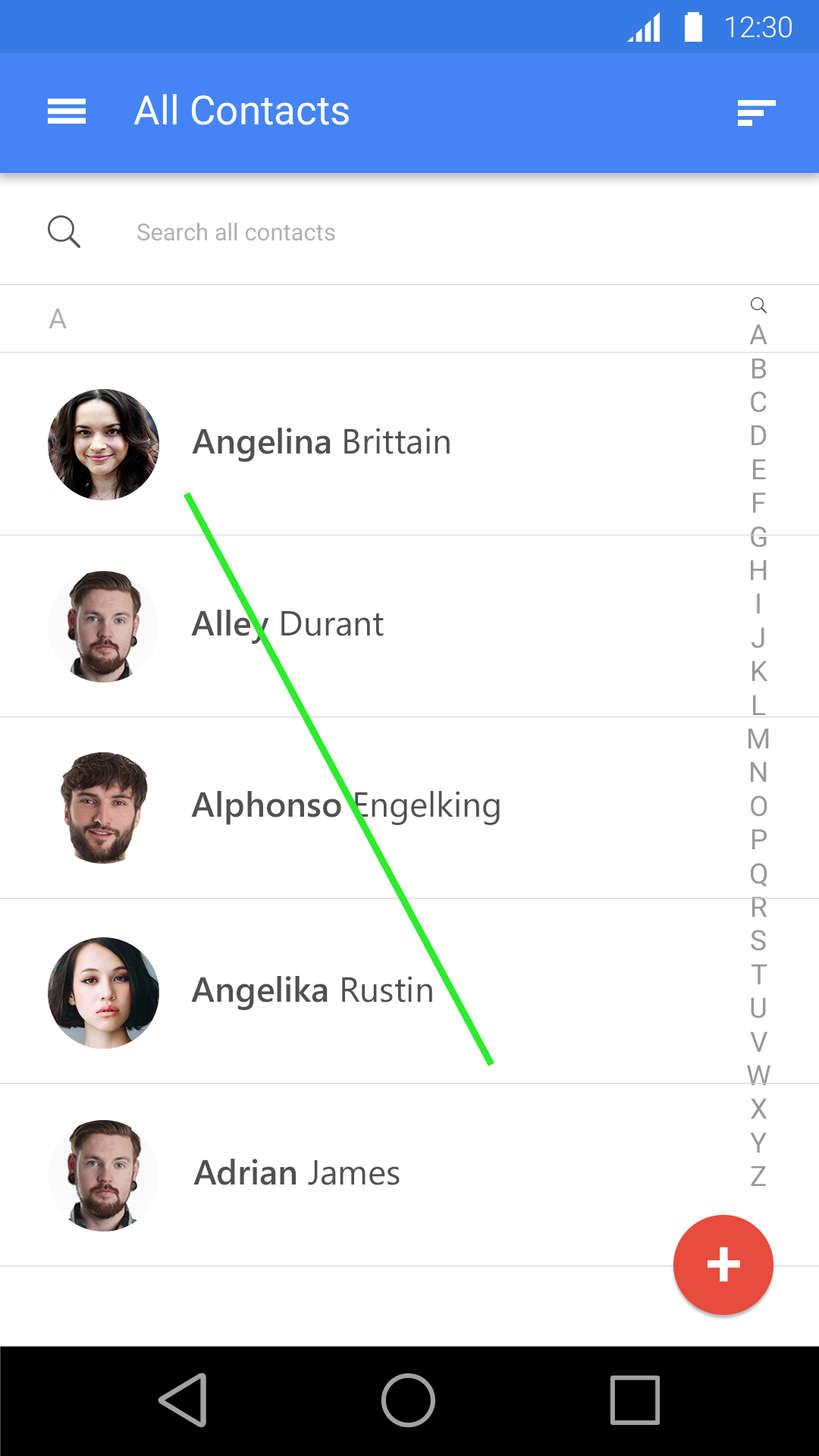
<style>
.page{position:relative;width:819px;height:1456px;background:#ffffff}
.page>*{position:absolute;margin:0}
.t1{font:28.8px "Roboto-Light";color:#ffffff}
.t2{font:40.2px "Roboto-Regular";color:#ffffff}
.t3{font:23.5px "Roboto-Regular";color:#b0b0b0}
.t4{font:28.1px "Roboto-Regular";color:#b0b0b0}
.t5{font:28.1px "Roboto-Regular";color:#989898}
.t6{font:34.9px "SegoeUI-SemiBold";color:#505050}
.t7{font:34.9px "SegoeUI";color:#505050}
.t8{font:66px "Roboto-Medium";color:#ffffff}
</style>
<div class="page">
<p class="t1" style="left:726px;top:16px;width:66px;height:22px">12:30</p>
<p class="t2" style="left:133px;top:94px;width:216px;height:31px">All Contacts</p>
<p class="t3" style="left:137px;top:222px;width:198px;height:19px">Search all contacts</p>
<p class="t4" style="left:49px;top:308px;width:18px;height:20px">A</p>
<p class="t5" style="left:747px;top:324px;width:23px;height:862px;text-align:center">A<br>B<br>C<br>D<br>E<br>F<br>G<br>H<br>I<br>J<br>K<br>L<br>M<br>N<br>O<br>P<br>Q<br>R<br>S<br>T<br>U<br>V<br>W<br>X<br>Y<br>Z</p>
<p class="t6" style="left:192px;top:428px;width:258px;height:34px">Angelina<span class="t7"> Brittain</span></p>
<p class="t7" style="left:191px;top:610px;width:193px;height:34px"><span class="t6">Alley </span>Durant</p>
<p class="t7" style="left:191px;top:791px;width:309px;height:34px"><span class="t6">Alphonso </span>Engelking</p>
<p class="t6" style="left:191px;top:976px;width:241px;height:34px">Angelika<span class="t7"> Rustin</span></p>
<p class="t6" style="left:193px;top:1159px;width:207px;height:26px">Adrian <span class="t7">James</span></p>
<p class="t8" style="left:708px;top:1247px;width:32px;height:35px">+</p>
</div>
